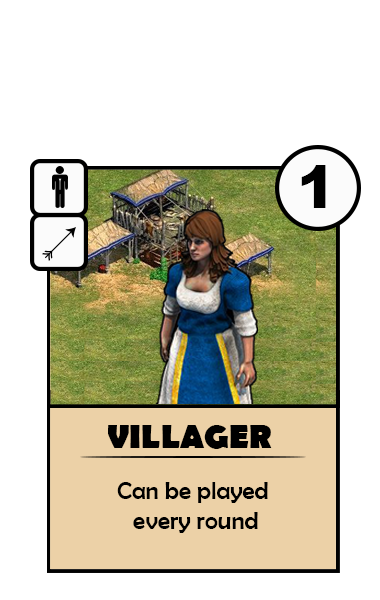
<style>
.page{position:relative;width:380px;height:600px;background:#ffffff}
.page>*{position:absolute;margin:0}
.t1{font:58.3px "Arial-Black";color:#000000}
.t2{font:33.3px "BerlinSansFB-Bold";color:#000000}
.t3{font:25px "BerlinSansFB-Reg";color:#000000}
</style>
<div class="page">
<p class="t1" style="left:301px;top:165px;width:25px;height:43px">1</p>
<p class="t2" style="left:108px;top:425px;width:164px;height:24px">VILLAGER</p>
<p class="t3" style="left:117px;top:482px;width:151px;height:51px;text-align:center">Can be played <br>every round</p>
</div>
